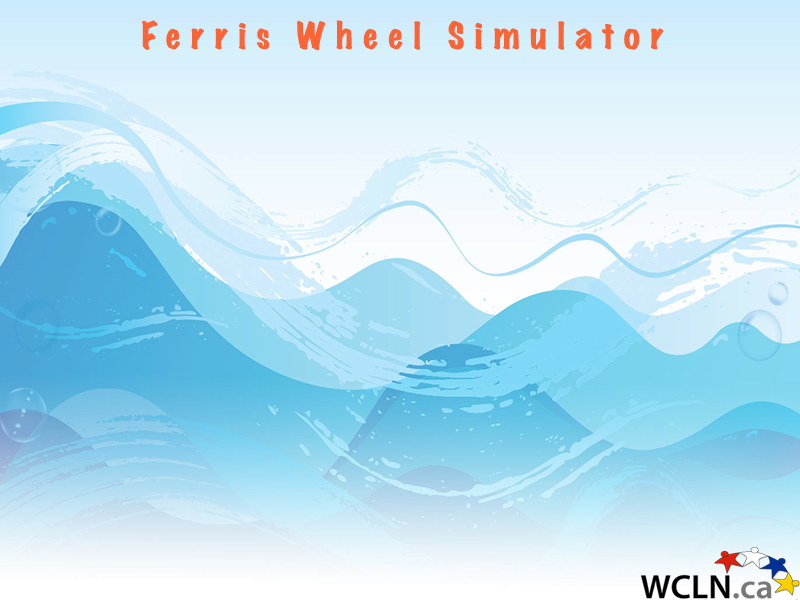
<style>
.page{position:relative;width:800px;height:600px}
.page>*{position:absolute;margin:0}
.t1{font:33px "MarkerFelt-Wide";letter-spacing:0.28em;color:#fb6535}
</style>
<div class="page">
<p class="t1" style="left:142px;top:20px;width:522px;height:31px">Ferris Wheel Simulator</p>
</div>
